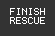
<style>
.page{position:relative;width:55px;height:36px;background:#333333}
.page>*{position:absolute;margin:0}
.t1{font:8px "Terminal";color:#ffffff}
</style>
<div class="page">
<p class="t1" style="left:10px;top:8px;width:35px;height:16px;text-align:center">FINISH<br>RESCUE</p>
</div>
